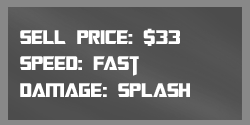
<style>
.page{position:relative;width:250px;height:125px}
.page>*{position:absolute;margin:0}
.t1{font:22px "TransformersMovie";color:#ffffff}
.t2{font:22px "TransformersMovie";letter-spacing:0.02em;color:#ffffff}
.t3{font:22px "TransformersMovie";letter-spacing:-0.08em;color:#ffffff}
</style>
<div class="page">
<p class="t1" style="left:20px;top:28px;width:170px;height:69px">sell p<span class="t2">ri</span>ce: $33<br>spee<span class="t2">d</span>: <span class="t3">F</span>ast<br>dama<span class="t2">ge</span>: s<span class="t2">p</span>lash</p>
</div>
